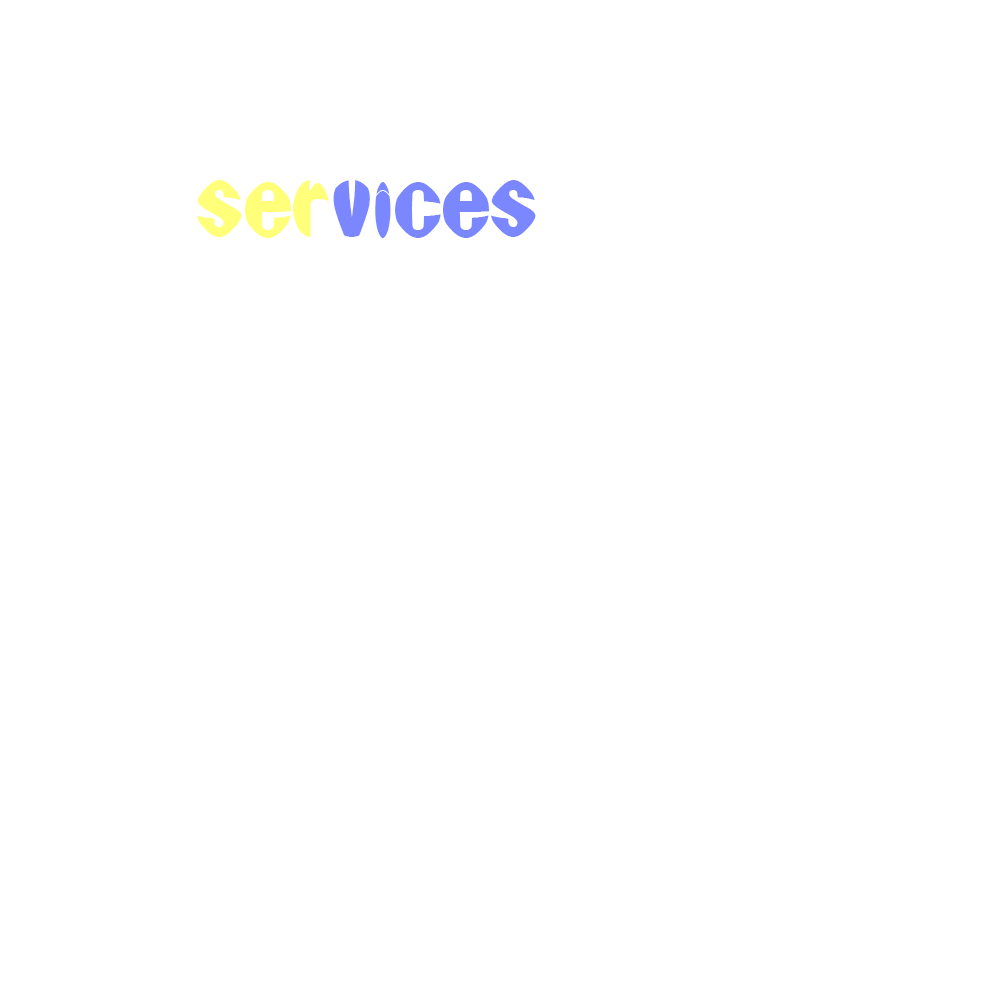
<style>
.page{position:relative;width:1000px;height:1000px;background:#ffffff}
.page>*{position:absolute;margin:0}
.t1{font:60px "Aragones";color:#7a87ff}
.t2{font:60px "Aragones";color:#ffff7a}
</style>
<div class="page">
<p class="t1" style="left:197px;top:180px;width:339px;height:58px"><span class="t2">ser</span>vices</p>
</div>
